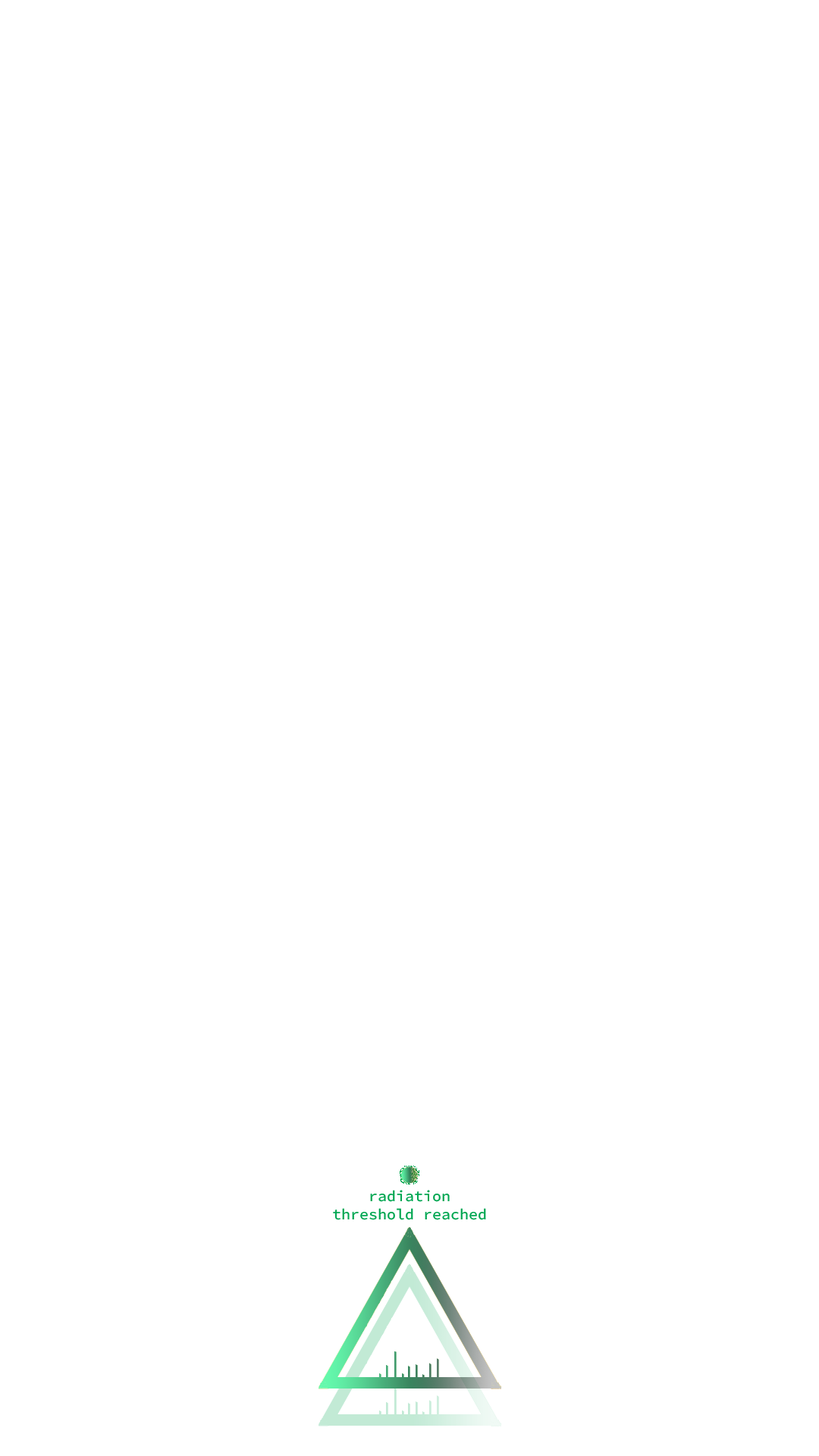
<style>
.page{position:relative;width:819px;height:1456px;background:#ffffff}
.page>*{position:absolute;margin:0}
.t1{font:15.2px "SourceCodeRoman-Medium";color:#00a651}
</style>
<div class="page">
<p class="t1" style="left:333px;top:1190px;width:153px;height:30px;text-align:center">radiation threshold reached</p>
</div>
